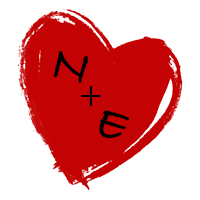
<style>
.page{position:relative;width:200px;height:200px;background:#ffffff}
.page>*{position:absolute;margin:0}
.t1{font:50px "BradleyHandITCTT-Bold";letter-spacing:-0.005em;color:#000000}
.t2{font:33.3px "BradleyHandITCTT-Bold";letter-spacing:-0.005em;color:#000000}
</style>
<div class="page">
<p class="t1" style="left:53px;top:51px;width:36px;height:33px;rotate:11deg">N</p>
<p class="t2" style="left:81px;top:86px;width:20px;height:20px">+</p>
<p class="t1" style="left:99px;top:110px;width:31px;height:29px;rotate:21deg">E</p>
</div>
